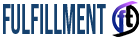
<style>
.page{position:relative;width:140px;height:37px;background:#ffffff}
.page>*{position:absolute;margin:0}
.t1{font:42.7px "BebasNeue-Regular";color:#15416e;scale:0.61 1}
</style>
<div class="page">
<p class="t1" style="left:3px;top:4px;width:103px;height:30px">FulfillmenT</p>
</div>
